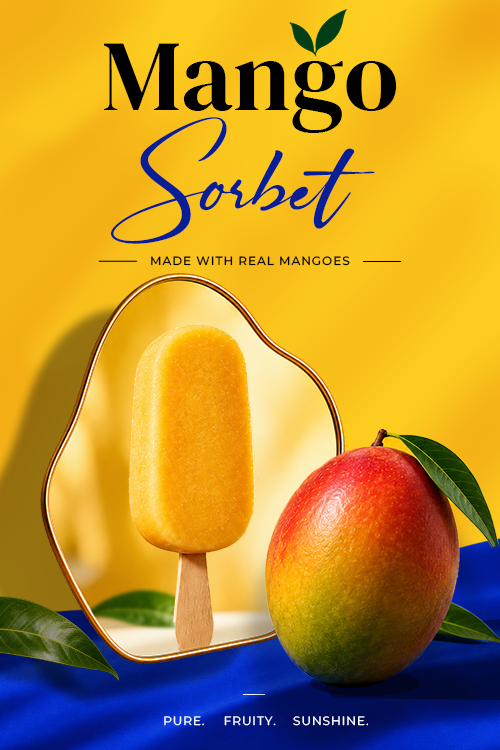
<style>
.page{position:relative;width:500px;height:750px}
.page>*{position:absolute;margin:0}
.t1{font:100px "DMSerifDisplay-Regular";color:#000000}
.t2{font:90px "Ruthligos";color:#081e97}
.t3{font:12px "Montserrat-Medium";letter-spacing:0.08em;color:#000000}
.t4{font:12px "Montserrat-Regular";letter-spacing:0.08em;color:#ffffff}
</style>
<div class="page">
<p class="t1" style="left:104px;top:43px;width:293px;height:90px">Mango</p>
<p class="t2" style="left:111px;top:117px;width:264px;height:127px">Sorbet</p>
<p class="t3" style="left:151px;top:256px;width:199px;height:10px">MADE WITH REAL MANGOES</p>
<p class="t4" style="left:164px;top:716px;width:40px;height:10px">PURE.</p>
<p class="t4" style="left:224px;top:716px;width:52px;height:10px">FRUITY.</p>
<p class="t4" style="left:293px;top:716px;width:75px;height:10px">SUNSHINE.</p>
</div>
